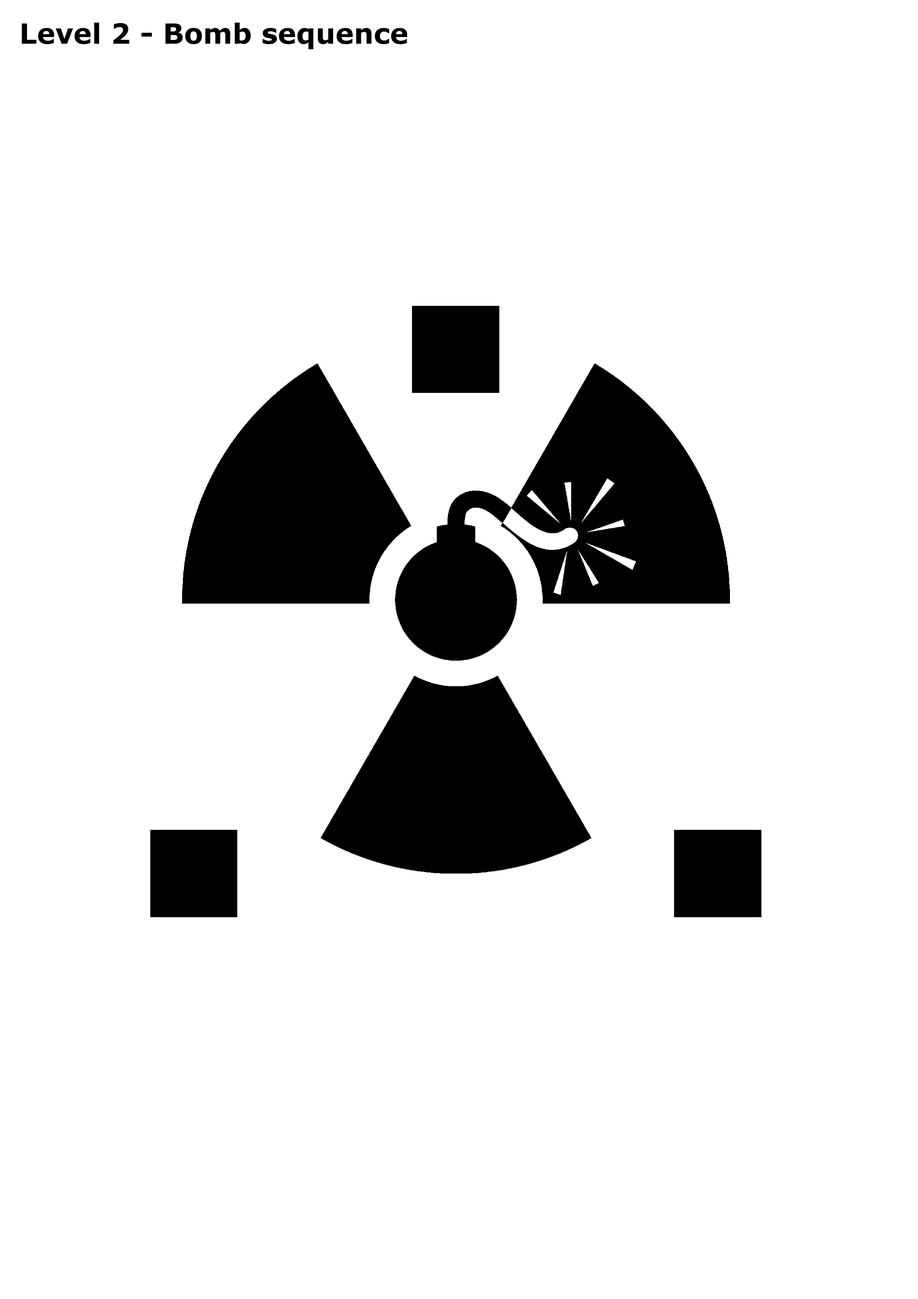
<style>
.page{position:relative;width:918px;height:1299px;background:#ffffff}
.page>*{position:absolute;margin:0}
.t1{font:27.8px "Verdana-Bold";color:#000000}
</style>
<div class="page">
<p class="t1" style="left:22px;top:23px;width:385px;height:26px">Level 2 - Bomb sequence</p>
</div>
